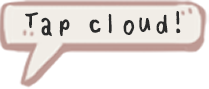
<style>
.page{position:relative;width:209px;height:89px;background:#ffffff}
.page>*{position:absolute;margin:0}
.t1{font:32.9px "maki_maruhand";color:#2b2b2b}
</style>
<div class="page">
<p class="t1" style="left:25px;top:11px;width:156px;height:26px">Tap cloud!</p>
</div>
